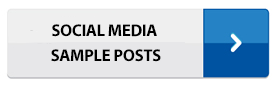
<style>
.page{position:relative;width:275px;height:85px;background:#e7e7e9}
.page>*{position:absolute;margin:0}
.t1{font:17px/25px "MyriadPro-Bold";letter-spacing:-0.025em;color:#000000}
</style>
<div class="page">
<p class="t1" style="left:51px;top:24px;width:110px;height:38px;text-align:center">SOCIAL MEDIA <br>SAMPLE POSTS</p>
</div>
